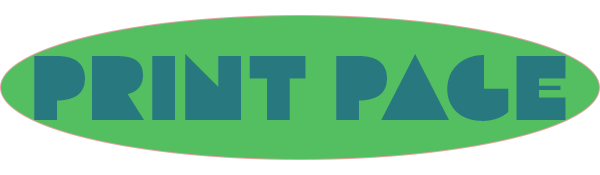
<style>
.page{position:relative;width:600px;height:175px;background:#53bf60}
.page>*{position:absolute;margin:0}
.t1{font:135.2px "Flegrei-Regular";color:#297980}
</style>
<div class="page">
<p class="t1" style="left:34px;top:54px;width:532px;height:67px">Print Page</p>
</div>
